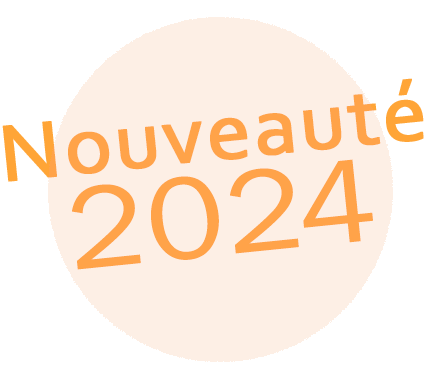
<style>
.page{position:relative;width:445px;height:367px;background:#fdefe5}
.page>*{position:absolute;margin:0}
.t1{font:84px/96px "Corbel";letter-spacing:0.01em;color:#ffa349;font-weight:bold;scale:1.05 1}
.t2{font:120px/96px "FranklinGothic-Book";letter-spacing:0.01em;color:#ffa349;scale:1.11 1}
</style>
<div class="page">
<p class="t1" style="left:2px;top:78px;width:422px;height:192px;text-align:center;rotate:-6deg">Nouveauté<br><span class="t2">2024</span></p>
</div>
